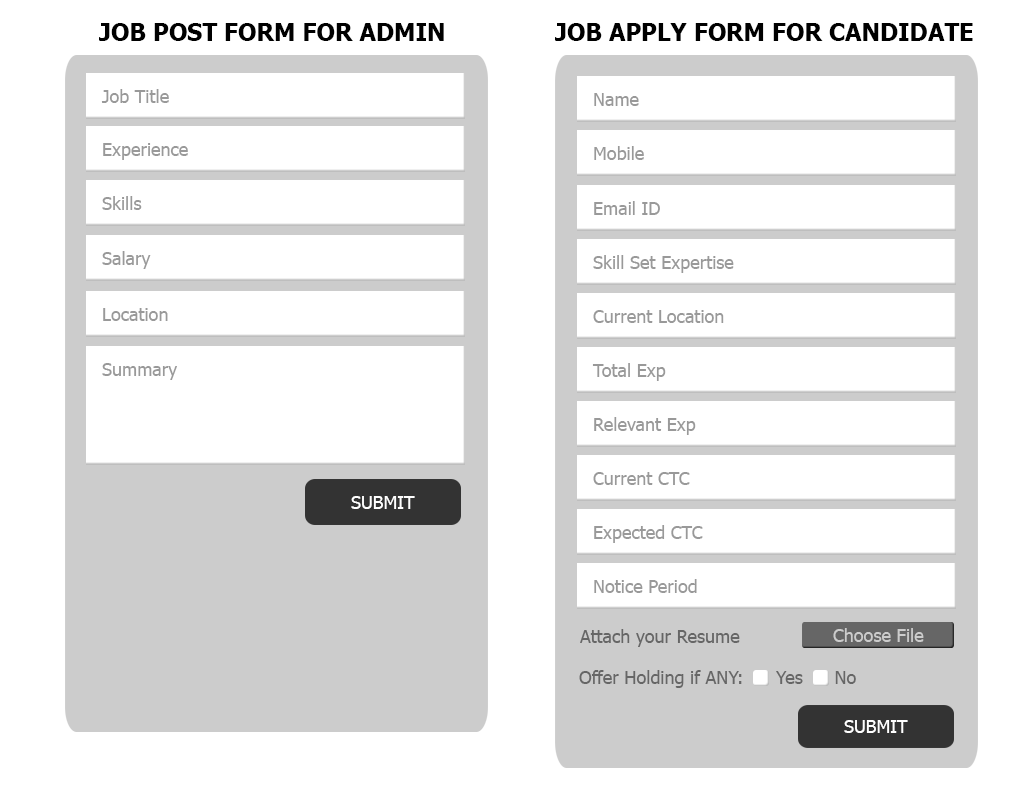
<style>
.page{position:relative;width:1024px;height:800px;background:#ffffff}
.page>*{position:absolute;margin:0}
.t1{font:24px "Tahoma-Bold";color:#000000}
.t2{font:18px "Tahoma";color:#999999}
.t3{font:18px "Tahoma";color:#ffffff}
.t4{font:18px "Tahoma";color:#666666}
.t5{font:18px "Tahoma";color:#cccccc}
</style>
<div class="page">
<p class="t1" style="left:99px;top:23px;width:345px;height:18px">JOB POST FORM FOR ADMIN</p>
<p class="t1" style="left:555px;top:23px;width:418px;height:18px">JOB APPLY FORM FOR CANDIDATE</p>
<p class="t2" style="left:101px;top:89px;width:68px;height:14px">Job Title</p>
<p class="t2" style="left:594px;top:93px;width:45px;height:13px">Name</p>
<p class="t2" style="left:103px;top:143px;width:85px;height:17px">Experience</p>
<p class="t2" style="left:594px;top:146px;width:50px;height:14px">Mobile</p>
<p class="t2" style="left:102px;top:196px;width:40px;height:14px">Skills</p>
<p class="t2" style="left:594px;top:201px;width:66px;height:14px">Email ID</p>
<p class="t2" style="left:102px;top:251px;width:49px;height:18px">Salary</p>
<p class="t2" style="left:593px;top:255px;width:141px;height:18px">Skill Set Expertise</p>
<p class="t2" style="left:103px;top:308px;width:65px;height:13px">Location</p>
<p class="t2" style="left:593px;top:310px;width:131px;height:13px">Current Location</p>
<p class="t2" style="left:102px;top:363px;width:75px;height:17px">Summary</p>
<p class="t2" style="left:592px;top:363px;width:74px;height:18px">Total Exp</p>
<p class="t2" style="left:594px;top:417px;width:102px;height:18px">Relevant Exp</p>
<p class="t2" style="left:593px;top:472px;width:97px;height:13px">Current CTC</p>
<p class="t3" style="left:351px;top:496px;width:64px;height:13px">SUBMIT</p>
<p class="t2" style="left:594px;top:525px;width:109px;height:18px">Expected CTC</p>
<p class="t2" style="left:594px;top:579px;width:103px;height:14px">Notice Period</p>
<p class="t4" style="left:580px;top:629px;width:160px;height:18px">Attach your Resume</p>
<p class="t5" style="left:833px;top:628px;width:91px;height:14px">Choose File</p>
<p class="t4" style="left:579px;top:670px;width:163px;height:18px">Offer Holding if ANY:</p>
<p class="t4" style="left:776px;top:671px;width:80px;height:13px">Yes     No</p>
<p class="t3" style="left:844px;top:720px;width:64px;height:13px">SUBMIT</p>
</div>
